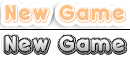
<style>
.page{position:relative;width:130px;height:60px;background:#ffffff}
.page>*{position:absolute;margin:0}
.t1{font:25.9px "DoubleBubbleShadow";color:#fdbe83}
</style>
<div class="page">
<p class="t1" style="left:4px;top:4px;width:122px;height:19px">New Game</p>
</div>
